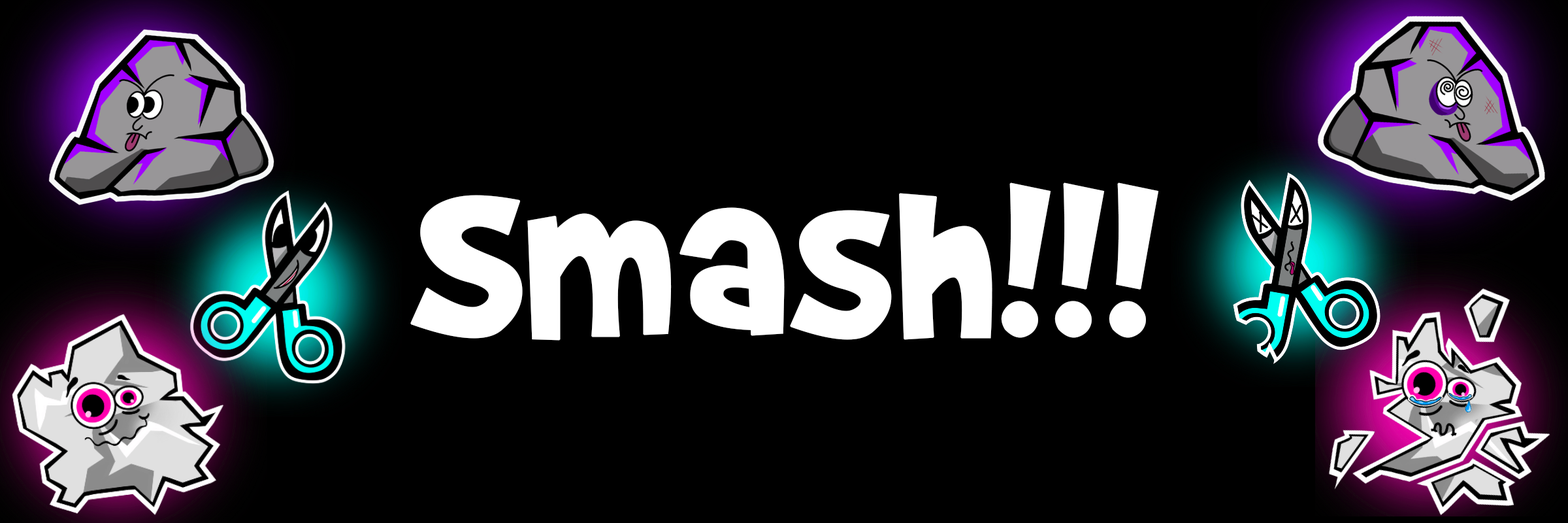
<style>
.page{position:relative;width:1568px;height:523px;background:#000000}
.page>*{position:absolute;margin:0}
.t1{font:241.7px "BradyBunchRemastered";color:#ffffff;font-weight:bold}
</style>
<div class="page">
<p class="t1" style="left:410px;top:182px;width:749px;height:158px">Smash!!!</p>
</div>
